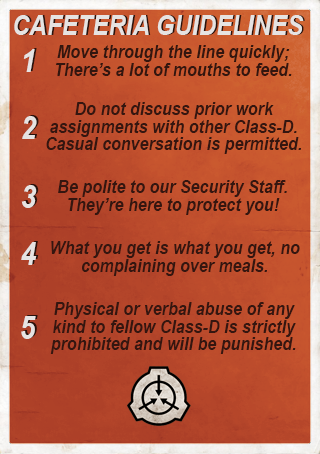
<style>
.page{position:relative;width:320px;height:454px}
.page>*{position:absolute;margin:0}
.t1{font:26.7px "Arial-BoldItalicMT";letter-spacing:0.01em;color:#e6e3e2;scale:0.89 1}
.t2{font:26.7px "Arial-BoldItalicMT";letter-spacing:0.01em;scale:0.89 1}
.t3{font:31.6px "Arial-BoldItalicMT";letter-spacing:0.01em;color:#e6e3e2;scale:0.89 1}
.t4{font:31.6px "Arial-BoldItalicMT";letter-spacing:0.01em;scale:0.89 1}
.t5{font:17.8px/4.3px "Arial-BoldItalicMT";letter-spacing:0.01em;color:#33160f;scale:0.89 1}
.t6{font:17.8px/4.3px "Arial-BoldItalicMT";letter-spacing:0.01em;color:#341610;scale:0.89 1}
</style>
<div class="page">
<p class="t1" style="left:14px;top:15px;width:290px;height:20px">CAFETERIA GUIDELINES</p>
<p class="t2" style="left:16px;top:15px;width:289px;height:20px">CAFETERIA GUIDELINES</p>
<p class="t3" style="left:23px;top:49px;width:12px;height:23px">1</p>
<p class="t4" style="left:25px;top:48px;width:12px;height:23px">1</p>
<p class="t5" style="left:56px;top:45px;width:236px;height:31px;text-align:center">Move through the line quickly;<br><br><br><br>There’s a lot of mouths to feed.</p>
<p class="t6" style="left:46px;top:102px;width:255px;height:52px;text-align:center">Do not discuss prior work<br><br><br><br>assignments with other Class-D.<br><br><br><br>Casual conversation is permitted.</p>
<p class="t3" style="left:22px;top:116px;width:15px;height:23px">2</p>
<p class="t4" style="left:24px;top:115px;width:15px;height:23px">2</p>
<p class="t3" style="left:21px;top:185px;width:16px;height:23px">3</p>
<p class="t4" style="left:23px;top:184px;width:16px;height:23px">3</p>
<p class="t6" style="left:58px;top:180px;width:229px;height:35px;text-align:center">Be polite to our Security Staff.<br><br><br><br>They’re here to protect you!</p>
<p class="t3" style="left:21px;top:242px;width:16px;height:23px">4</p>
<p class="t4" style="left:23px;top:241px;width:16px;height:23px">4</p>
<p class="t6" style="left:51px;top:241px;width:249px;height:35px;text-align:center">What you get is what you get, no<br><br><br><br>complaining over meals.</p>
<p class="t6" style="left:50px;top:302px;width:246px;height:52px;text-align:center">Physical or verbal abuse of any<br><br><br><br>kind to fellow Class-D is strictly<br><br><br><br>prohibited and will be punished.</p>
<p class="t3" style="left:21px;top:316px;width:15px;height:23px">5</p>
</div>
